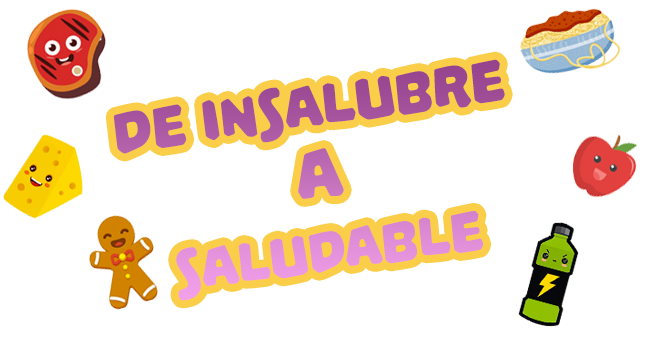
<style>
.page{position:relative;width:651px;height:341px;background:#ffffff}
.page>*{position:absolute;margin:0}
.t1{font:62px/72.6px "PalameciaTitling-Regular"}
.t2{font:75px/72.6px "PalameciaTitling-Regular"}
.t3{font:60px/72.6px "PalameciaTitling-Regular"}
</style>
<div class="page">
<p class="t1" style="left:113px;top:59px;width:392px;height:242px;text-align:center;rotate:-8deg">de insalubre<br><span class="t2">a<br></span><span class="t3">saludable</span></p>
</div>
